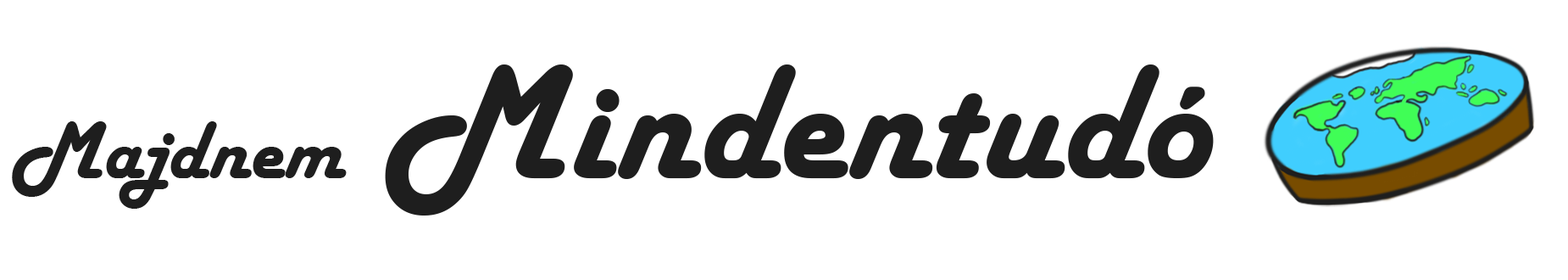
<style>
.page{position:relative;width:1568px;height:280px;background:#ffffff}
.page>*{position:absolute;margin:0}
.t1{font:169px "HarlowSolid";color:#1e1e1e}
.t2{font:84.5px "HarlowSolid";color:#1e1e1e}
</style>
<div class="page">
<p class="t1" style="left:12px;top:64px;width:1202px;height:151px"><span class="t2">Majdnem</span> Mindentudó</p>
</div>
